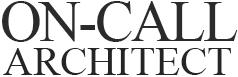
<style>
.page{position:relative;width:238px;height:77px;background:#ffffff}
.page>*{position:absolute;margin:0}
.t1{font:57.8px "TimesNewRomanPSMT";letter-spacing:-0.05em;color:#2b2b2b;text-transform:uppercase}
.t2{font:40.4px "TimesNewRomanPSMT";color:#262525;text-transform:uppercase}
</style>
<div class="page">
<p class="t1" style="left:2px;top:1px;width:236px;height:41px">on-call</p>
<p class="t2" style="left:3px;top:48px;width:228px;height:27px">architect</p>
</div>
